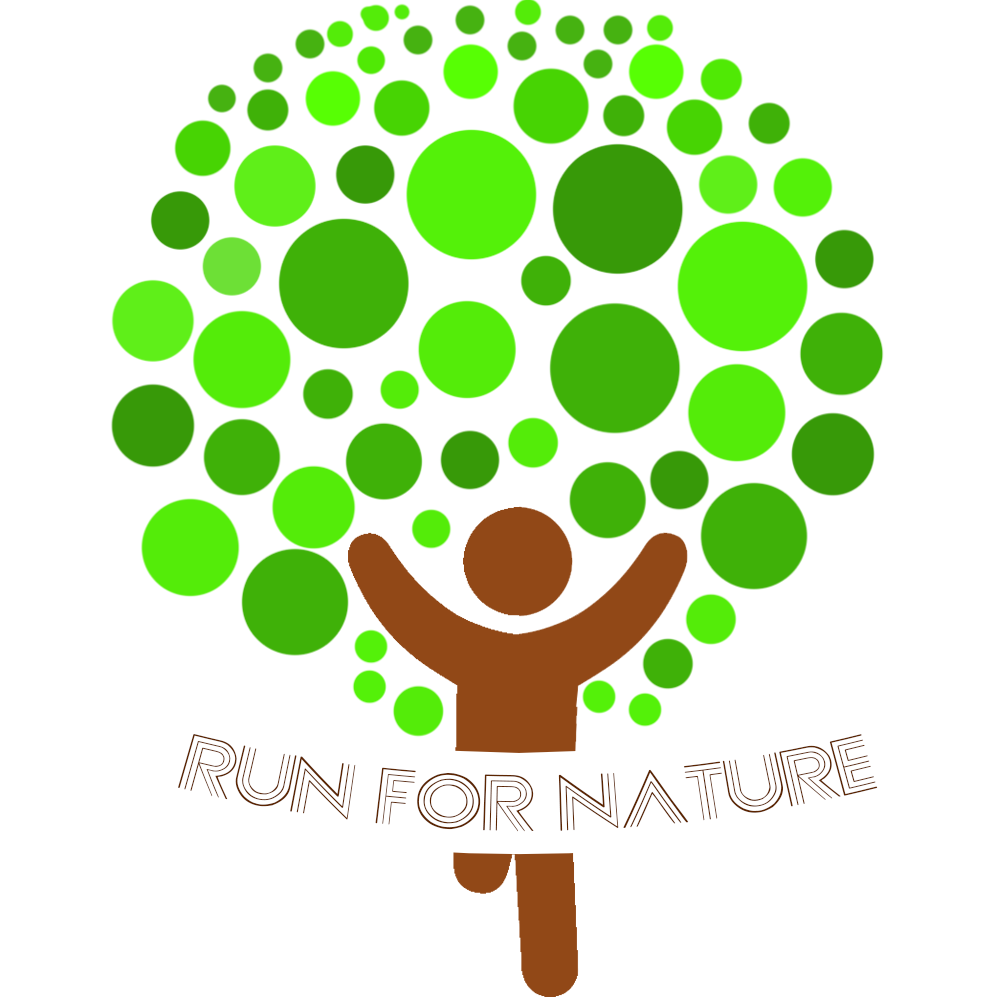
<style>
.page{position:relative;width:1000px;height:1000px;background:#ffffff}
.page>*{position:absolute;margin:0}
.t1{font:79.6px "Confessions";color:#5c2500;scale:1.08 1}
</style>
<div class="page">
<p class="t1" style="left:178px;top:734px;width:700px;height:98px">RUN FOR NATURE</p>
</div>
